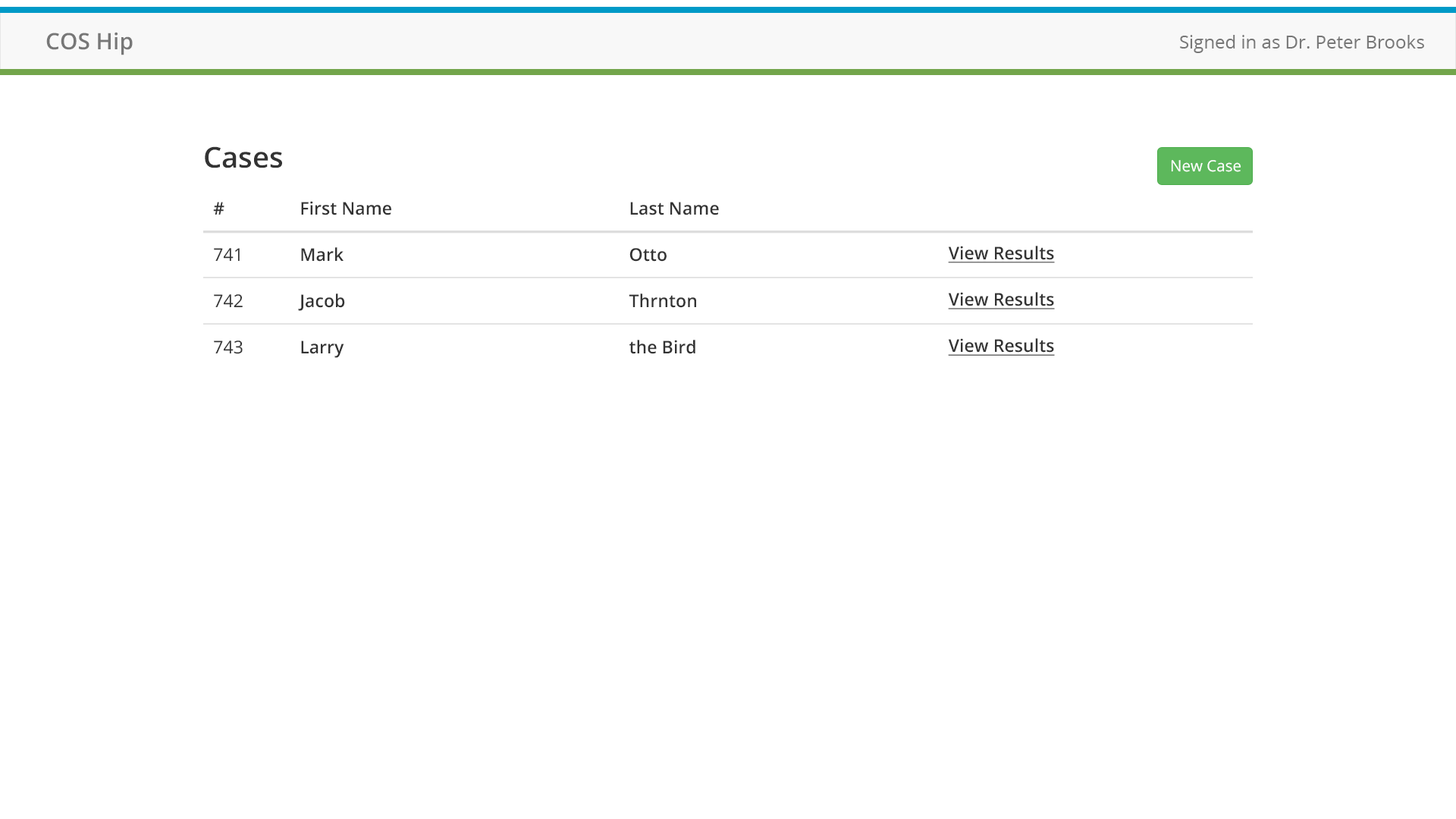
<style>
.page{position:relative;width:1456px;height:819px;background:#ffffff}
.page>*{position:absolute;margin:0}
.t1{font:22.6px "OpenSans-Semibold";color:#777777}
.t2{font:18.2px "OpenSans";color:#777777}
.t3{font:28.6px "OpenSans-Semibold";color:#333333}
.t4{font:15.6px "OpenSans";color:#ffffff}
.t5{font:17.6px/46.4px "OpenSans";color:#333333}
.t6{font:17.6px/46.4px "OpenSans-Semibold";color:#333333}
.t7{font:17.6px/46.4px "OpenSans-Semibold";color:#333333;text-decoration:underline}
</style>
<div class="page">
<p class="t1" style="left:46px;top:32px;width:87px;height:23px">COS Hip</p>
<p class="t2" style="left:1180px;top:35px;width:244px;height:18px">Signed in as Dr. Peter Brooks</p>
<p class="t3" style="left:205px;top:146px;width:77px;height:22px">Cases</p>
<p class="t4" style="left:1171px;top:160px;width:70px;height:12px">New Case</p>
<p class="t5" style="left:213px;top:202px;width:30px;height:152px"><span class="t6">#<br></span>741<br>742<br>743</p>
<p class="t6" style="left:298px;top:201px;width:93px;height:157px">First Name<br>Mark<br>Jacob<br>Larry</p>
<p class="t6" style="left:629px;top:202px;width:90px;height:152px">Last Name<br>Otto<br>Thrnton<br>the Bird</p>
<p class="t7" style="left:948px;top:246px;width:107px;height:110px">View Results<br>View Results<br>View Results</p>
</div>
